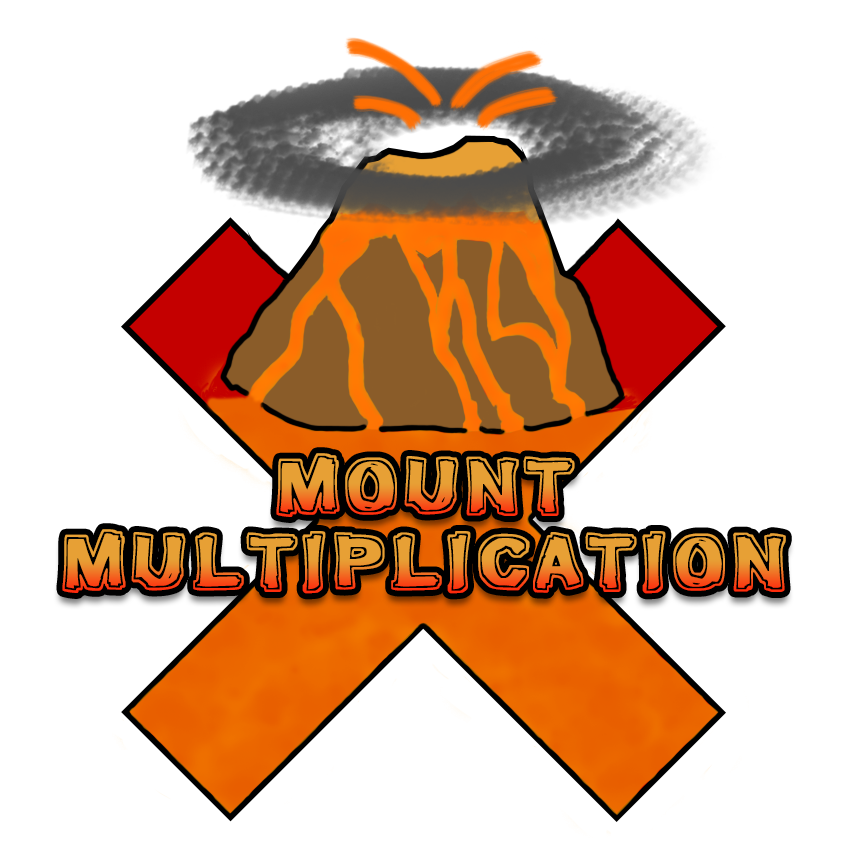
<style>
.page{position:relative;width:850px;height:850px;background:#ffffff}
.page>*{position:absolute;margin:0}
.t1{font:77px "Firebug";scale:0.85 1}
</style>
<div class="page">
<p class="t1" style="left:276px;top:453px;width:299px;height:64px">MOUNT</p>
<p class="t1" style="left:62px;top:529px;width:724px;height:65px">MULTIPLICATION</p>
</div>
